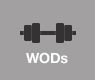
<style>
.page{position:relative;width:95px;height:80px;background:#a2a0a1}
.page>*{position:absolute;margin:0}
.t1{font:14px "HelveticaNeue-Bold";color:#feffff}
</style>
<div class="page">
<p class="t1" style="left:26px;top:52px;width:42px;height:12px">WODs</p>
</div>
